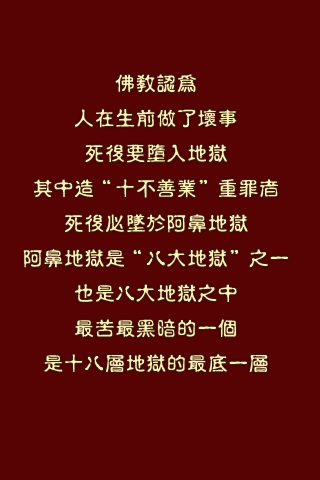
<style>
.page{position:relative;width:320px;height:480px;background:#580303}
.page>*{position:absolute;margin:0}
.t1{font:20px "JetLink-MediumOldStamp";color:#faf2b9;font-weight:bold}
</style>
<div class="page">
<p class="t1" style="left:23px;top:74px;width:265px;height:298px;text-align:center">佛教認為<br>人在生前做了壞事<br>死後要墮入地獄<br>其中造“十不善業”重罪者<br>死後必墜於阿鼻地獄<br>阿鼻地獄是“八大地獄”之一<br>也是八大地獄之中<br>最苦最黑暗的一個<br>是十八層地獄的最底一層</p>
</div>
